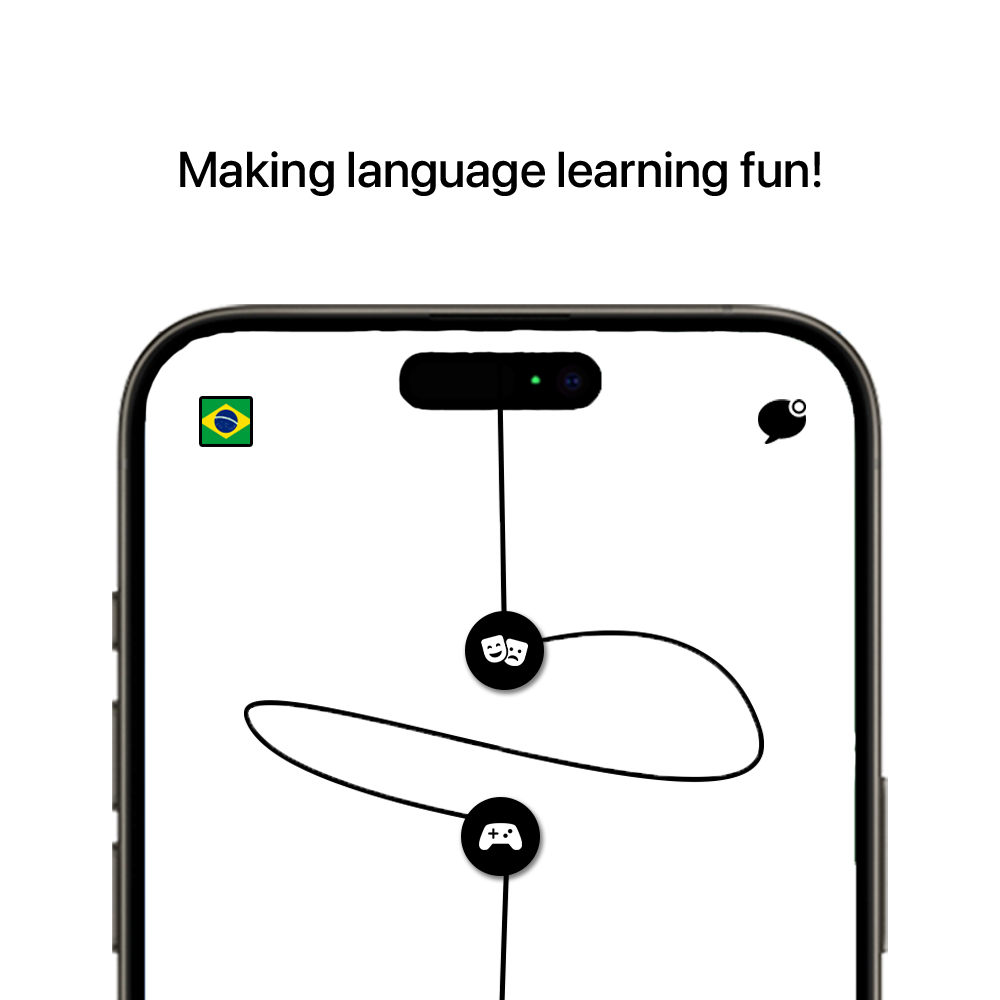
<style>
.page{position:relative;width:1000px;height:1000px;background:#ffffff}
.page>*{position:absolute;margin:0}
.t1{font:50px "SFPro-Medium";color:#000000}
</style>
<div class="page">
<p class="t1" style="left:180px;top:151px;width:641px;height:45px">Making language learning fun!</p>
</div>
